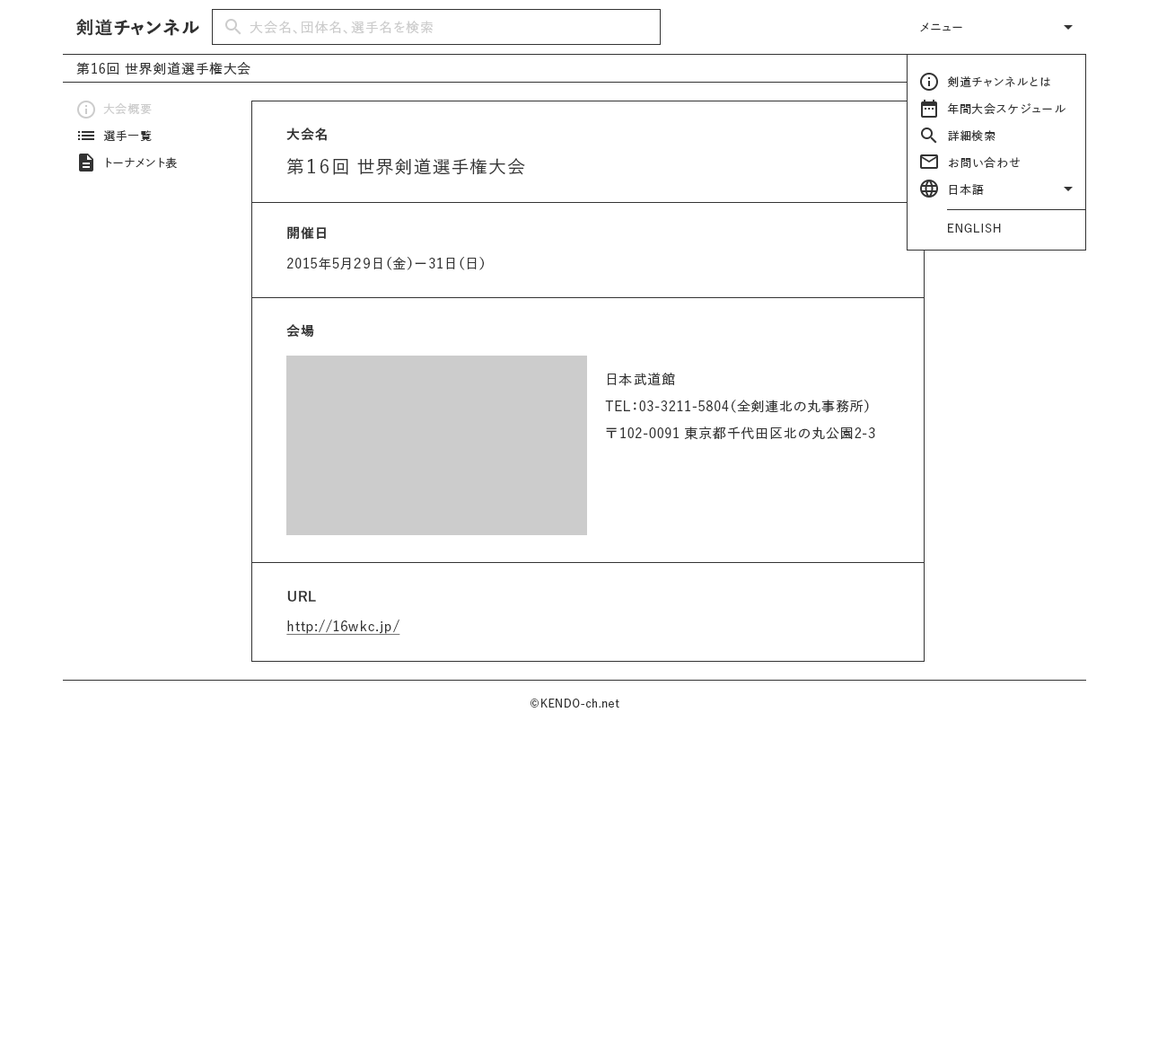
<style>
.page{position:relative;width:1149px;height:1038px;background:#ffffff}
.page>*{position:absolute;margin:0}
.t1{font:18px "YuGo-Bold";letter-spacing:0.05em;color:#333333}
.t2{font:13.5px "YuGo-Medium";letter-spacing:0.05em;color:#cccccc}
.t3{font:11.7px "YuGo-Medium";letter-spacing:0.05em;color:#333333}
.t4{font:13.5px "YuGo-Medium";letter-spacing:0.05em;color:#333333}
.t5{font:11.7px/26.9px "YuGo-Medium";letter-spacing:0.05em;color:#333333}
.t6{font:11.7px/26.9px "YuGo-Medium";letter-spacing:0.05em;color:#cccccc}
.t7{font:13.5px "YuGo-Bold";letter-spacing:0.05em;color:#333333}
.t8{font:18px "YuGo-Medium";letter-spacing:0.05em;color:#333333}
.t9{font:13.5px/26.9px "YuGo-Medium";letter-spacing:0.05em;color:#333333}
.t10{font:13.5px "YuGo-Medium";letter-spacing:0.05em;color:#333333;text-decoration:underline}
.t11{font:10.8px "YuGo-Medium";letter-spacing:0.05em;color:#333333}
</style>
<div class="page">
<p class="t1" style="left:76px;top:19px;width:123px;height:17px">剣道チャンネル</p>
<p class="t2" style="left:250px;top:21px;width:183px;height:13px">大会名、団体名、選手名を検索</p>
<p class="t3" style="left:920px;top:22px;width:42px;height:10px">メニュー</p>
<p class="t4" style="left:76px;top:62px;width:174px;height:13px">第16回 世界剣道選手権大会</p>
<p class="t5" style="left:947px;top:76px;width:119px;height:119px">剣道チャンネルとは<br>年間大会スケジュール<br>詳細検索<br>お問い合わせ<br>日本語</p>
<p class="t5" style="left:103px;top:102px;width:74px;height:67px"><span class="t6">大会概要<br></span>選手一覧<br>トーナメント表</p>
<p class="t7" style="left:286px;top:127px;width:41px;height:14px">大会名</p>
<p class="t8" style="left:287px;top:158px;width:238px;height:17px">第１６回 世界剣道選手権大会</p>
<p class="t7" style="left:287px;top:226px;width:39px;height:14px">開催日</p>
<p class="t3" style="left:948px;top:224px;width:53px;height:9px">ENGLISH</p>
<p class="t4" style="left:287px;top:257px;width:197px;height:13px">2015年5月２９日（金）ー31日（日）</p>
<p class="t7" style="left:286px;top:324px;width:28px;height:14px">会場</p>
<p class="t9" style="left:605px;top:373px;width:270px;height:67px">日本武道館<br>TEL：03-3211-5804（全剣連北の丸事務所）<br>〒102-0091 東京都千代田区北の丸公園2-3</p>
<p class="t7" style="left:287px;top:591px;width:29px;height:10px">URL</p>
<p class="t10" style="left:286px;top:619px;width:114px;height:16px">http://16wkc.jp/</p>
<p class="t11" style="left:531px;top:698px;width:88px;height:9px">©KENDO-ch.net</p>
</div>
